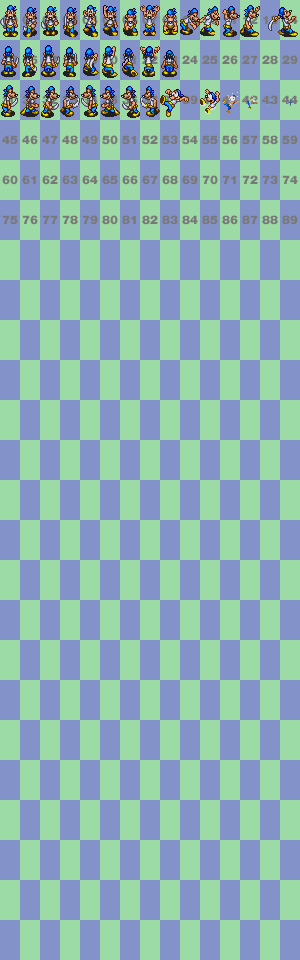
<style>
.page{position:relative;width:300px;height:960px;background:#8393ca}
.page>*{position:absolute;margin:0}
.t1{font:12px "HelveticaNeueCE-Black"}
.t2{font:12px "HelveticaNeueCE-Black";color:#797979}
</style>
<div class="page">
<p class="t1" style="left:2px;top:15px;width:16px;height:10px">00</p>
<p class="t1" style="left:263px;top:15px;width:15px;height:10px">13</p>
<p class="t1" style="left:83px;top:55px;width:15px;height:10px">19</p>
<p class="t2" style="left:182px;top:55px;width:16px;height:9px">24</p>
<p class="t2" style="left:202px;top:55px;width:16px;height:10px">25</p>
<p class="t2" style="left:222px;top:55px;width:16px;height:10px">26</p>
<p class="t2" style="left:242px;top:55px;width:16px;height:9px">27</p>
<p class="t2" style="left:262px;top:55px;width:16px;height:10px">28</p>
<p class="t2" style="left:282px;top:55px;width:16px;height:10px">29</p>
<p class="t2" style="left:182px;top:95px;width:16px;height:10px">39</p>
<p class="t2" style="left:222px;top:95px;width:14px;height:9px">41</p>
<p class="t2" style="left:242px;top:95px;width:16px;height:9px">42</p>
<p class="t2" style="left:262px;top:95px;width:16px;height:10px">43</p>
<p class="t2" style="left:282px;top:95px;width:16px;height:9px">44</p>
<p class="t2" style="left:2px;top:135px;width:16px;height:10px">45</p>
<p class="t2" style="left:22px;top:135px;width:16px;height:10px">46</p>
<p class="t2" style="left:42px;top:135px;width:16px;height:9px">47</p>
<p class="t2" style="left:62px;top:135px;width:16px;height:10px">48</p>
<p class="t2" style="left:82px;top:135px;width:16px;height:10px">49</p>
<p class="t2" style="left:102px;top:135px;width:16px;height:10px">50</p>
<p class="t2" style="left:122px;top:135px;width:14px;height:10px">51</p>
<p class="t2" style="left:142px;top:135px;width:16px;height:10px">52</p>
<p class="t2" style="left:162px;top:135px;width:16px;height:10px">53</p>
<p class="t2" style="left:182px;top:135px;width:16px;height:10px">54</p>
<p class="t2" style="left:202px;top:135px;width:16px;height:10px">55</p>
<p class="t2" style="left:222px;top:135px;width:16px;height:10px">56</p>
<p class="t2" style="left:242px;top:135px;width:16px;height:10px">57</p>
<p class="t2" style="left:262px;top:135px;width:16px;height:10px">58</p>
<p class="t2" style="left:282px;top:135px;width:16px;height:10px">59</p>
<p class="t2" style="left:2px;top:175px;width:16px;height:10px">60</p>
<p class="t2" style="left:22px;top:175px;width:14px;height:10px">61</p>
<p class="t2" style="left:42px;top:175px;width:16px;height:10px">62</p>
<p class="t2" style="left:62px;top:175px;width:16px;height:10px">63</p>
<p class="t2" style="left:82px;top:175px;width:16px;height:10px">64</p>
<p class="t2" style="left:102px;top:175px;width:16px;height:10px">65</p>
<p class="t2" style="left:122px;top:175px;width:16px;height:10px">66</p>
<p class="t2" style="left:142px;top:175px;width:16px;height:10px">67</p>
<p class="t2" style="left:162px;top:175px;width:16px;height:10px">68</p>
<p class="t2" style="left:182px;top:175px;width:16px;height:10px">69</p>
<p class="t2" style="left:202px;top:175px;width:16px;height:10px">70</p>
<p class="t2" style="left:222px;top:175px;width:14px;height:9px">71</p>
<p class="t2" style="left:242px;top:175px;width:16px;height:9px">72</p>
<p class="t2" style="left:262px;top:175px;width:16px;height:10px">73</p>
<p class="t2" style="left:282px;top:175px;width:16px;height:9px">74</p>
<p class="t2" style="left:2px;top:215px;width:16px;height:10px">75</p>
<p class="t2" style="left:22px;top:215px;width:16px;height:10px">76</p>
<p class="t2" style="left:42px;top:215px;width:16px;height:9px">77</p>
<p class="t2" style="left:62px;top:215px;width:16px;height:10px">78</p>
<p class="t2" style="left:82px;top:215px;width:16px;height:10px">79</p>
<p class="t2" style="left:102px;top:215px;width:16px;height:10px">80</p>
<p class="t2" style="left:122px;top:215px;width:14px;height:10px">81</p>
<p class="t2" style="left:142px;top:215px;width:16px;height:10px">82</p>
<p class="t2" style="left:162px;top:215px;width:16px;height:10px">83</p>
<p class="t2" style="left:182px;top:215px;width:16px;height:10px">84</p>
<p class="t2" style="left:202px;top:215px;width:16px;height:10px">85</p>
<p class="t2" style="left:222px;top:215px;width:16px;height:10px">86</p>
<p class="t2" style="left:242px;top:215px;width:16px;height:10px">87</p>
<p class="t2" style="left:262px;top:215px;width:16px;height:10px">88</p>
<p class="t2" style="left:282px;top:215px;width:16px;height:10px">89</p>
</div>
